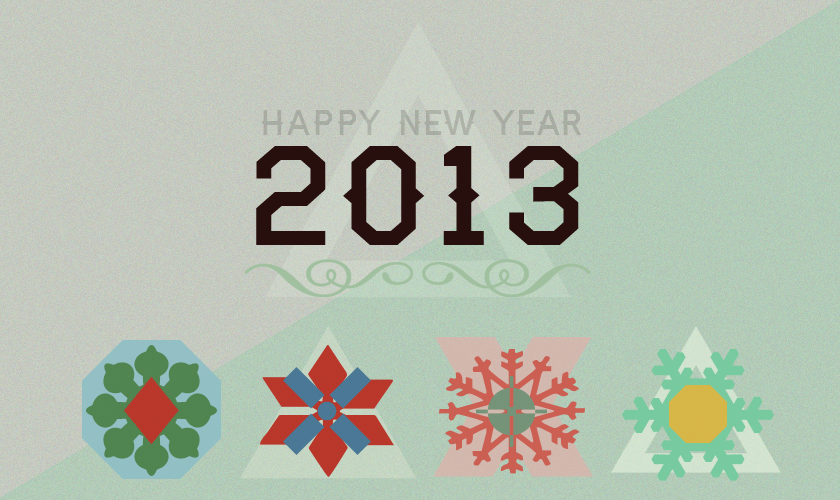
<style>
.page{position:relative;width:840px;height:500px}
.page>*{position:absolute;margin:0}
.t1{font:34px "Haymaker";color:#a9aea4}
.t2{font:135.3px "Haymaker";color:#270f0d}
</style>
<div class="page">
<p class="t1" style="left:261px;top:110px;width:320px;height:25px">happy new year</p>
<p class="t2" style="left:256px;top:146px;width:323px;height:99px">2013</p>
</div>
